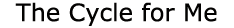
<style>
.page{position:relative;width:234px;height:28px;background:#ffffff}
.page>*{position:absolute;margin:0}
.t1{font:24px "Verdana";color:#030201}
</style>
<div class="page">
<p class="t1" style="left:15px;top:2px;width:202px;height:24px">The Cycle for Me</p>
</div>
